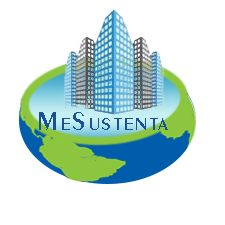
<style>
.page{position:relative;width:225px;height:225px;background:#ffffff}
.page>*{position:absolute;margin:0}
.t1{font:27.2px "Exotic350BT-DemiBold";letter-spacing:0.075em;color:#185293;font-variant:small-caps}
</style>
<div class="page">
<p class="t1" style="left:39px;top:112px;width:129px;height:18px">MeSustenta</p>
</div>
